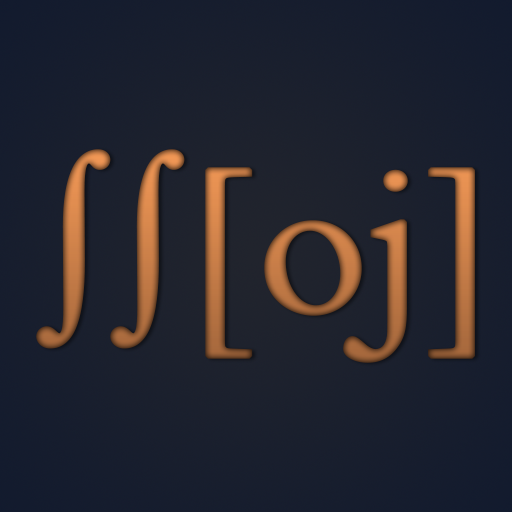
<style>
.page{position:relative;width:512px;height:512px}
.page>*{position:absolute;margin:0}
.t1{font:200px "BergamoPro-Regular";font-weight:bold}
</style>
<div class="page">
<p class="t1" style="left:36px;top:149px;width:439px;height:214px">∫∫[oj]</p>
</div>
